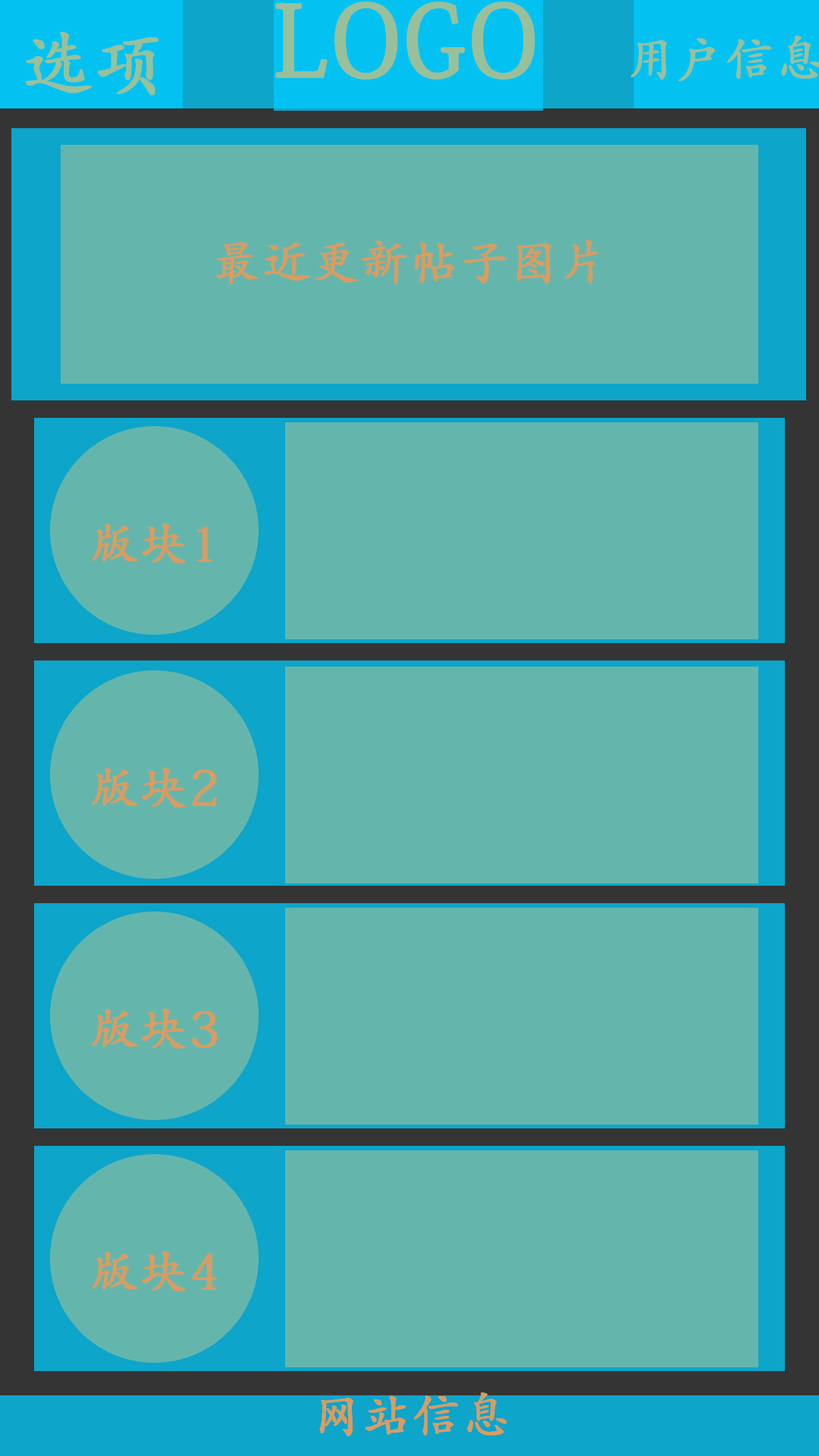
<style>
.page{position:relative;width:819px;height:1456px;background:#64b6ac}
.page>*{position:absolute;margin:0}
.t1{font:97.1px "AdobeKaitiStd-Regular";color:#99c09a;font-weight:bold}
.t2{font:72.8px "AdobeKaitiStd-Regular";color:#99c09a;font-weight:bold}
.t3{font:48.5px "AdobeKaitiStd-Regular";color:#99c09a;font-weight:bold}
.t4{font:48.5px "AdobeKaitiStd-Regular";color:#da9c60;font-weight:bold}
</style>
<div class="page">
<p class="t1" style="left:275px;top:2px;width:260px;height:78px">LOGO</p>
<p class="t2" style="left:25px;top:32px;width:133px;height:64px">选项</p>
<p class="t3" style="left:631px;top:36px;width:190px;height:45px">用户信息</p>
<p class="t4" style="left:216px;top:240px;width:382px;height:44px">最近更新帖子图片</p>
<p class="t4" style="left:92px;top:523px;width:120px;height:40px">版块1</p>
<p class="t4" style="left:92px;top:767px;width:125px;height:41px">版块2</p>
<p class="t4" style="left:92px;top:1009px;width:126px;height:40px">版块3</p>
<p class="t4" style="left:92px;top:1251px;width:125px;height:40px">版块4</p>
<p class="t4" style="left:319px;top:1392px;width:188px;height:44px">网站信息</p>
</div>
